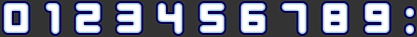
<style>
.page{position:relative;width:417px;height:37px;background:#333333}
.page>*{position:absolute;margin:0}
.t1{font:55px "YoungTechs";letter-spacing:0.2em;color:#ffffff}
</style>
<div class="page">
<p class="t1" style="left:3px;top:3px;width:411px;height:31px">0123456789:</p>
</div>
